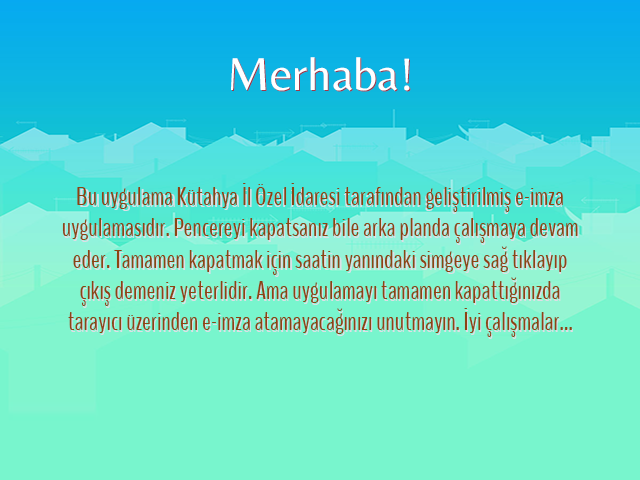
<style>
.page{position:relative;width:640px;height:480px;background:#78f5cd}
.page>*{position:absolute;margin:0}
.t1{font:48px "Belleza-Regular";color:#ffffff}
.t2{font:48px "Belleza-Regular"}
.t3{font:26px "BenchNine-Regular";color:#8c4413}
.t4{font:26px "BenchNine-Regular"}
</style>
<div class="page">
<p class="t1" style="left:231px;top:57px;width:179px;height:34px">Merhaba!</p>
<p class="t2" style="left:232px;top:58px;width:179px;height:34px">Merhaba!</p>
<p class="t3" style="left:62px;top:183px;width:516px;height:154px;text-align:center">Bu uygulama Kütahya İl Özel İdaresi tarafından geliştirilmiş e-imza uygulamasıdır. Pencereyi kapatsanız bile arka planda çalışmaya devam eder. Tamamen kapatmak için saatin yanındaki simgeye sağ tıklayıp çıkış demeniz yeterlidir. Ama uygulamayı tamamen kapattığınızda tarayıcı üzerinden e-imza atamayacağınızı unutmayın. İyi çalışmalar...</p>
<p class="t4" style="left:63px;top:189px;width:516px;height:150px;text-align:center">Bu uygulama kütahya il özel idaresi tarafından geliştirilmiş e-imza uygulamasıdır. Pencereyi kapatsanız bile arka planda çalışmaya devam eder. Tamamen kapatmak için saatin yanındaki simgeye sağ tıklatıp çıkış demeniz yeterlidir. Ama uygulamayı tamamen kapattığınızda tarayıcı üzerinden e-imza atamayacağınızı unutmayın. İyi çalışmalar...</p>
</div>
